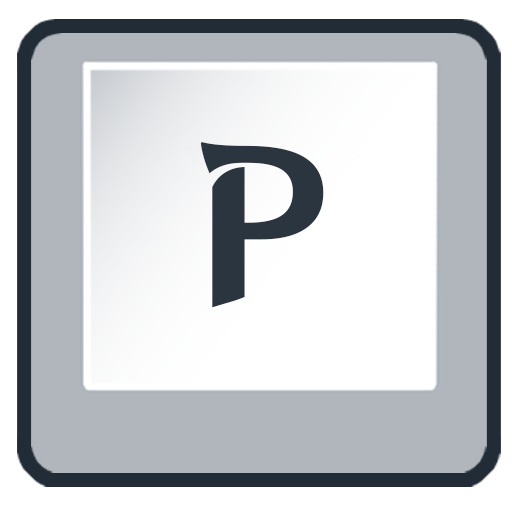
<style>
.page{position:relative;width:512px;height:512px;background:#b1b6bd}
.page>*{position:absolute;margin:0}
.t1{font:211.2px "DNFForgedBlade-Bold";letter-spacing:0.1em;color:#2a353f}
</style>
<div class="page">
<p class="t1" style="left:200px;top:142px;width:124px;height:166px">P</p>
</div>
